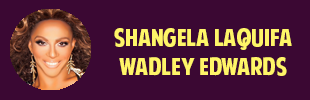
<style>
.page{position:relative;width:310px;height:100px;background:#3b0833}
.page>*{position:absolute;margin:0}
.t1{font:24px "AmericanPurpose";color:#fff568}
.t2{font:24px "Tahoma";color:#ffffff}
</style>
<div class="page">
<p class="t1" style="left:114px;top:28px;width:178px;height:48px;text-align:center"><span class="t2"><br></span>Shangela Laquifa Wadley Edwards</p>
</div>
